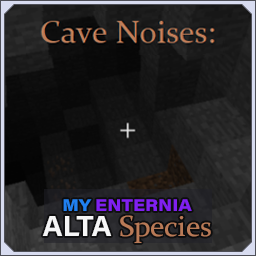
<style>
.page{position:relative;width:256px;height:256px}
.page>*{position:absolute;margin:0}
.t1{font:16.7px/25px "AcuminConcept_760.000wght_112.000wdth";color:#8020f0}
.t2{font:16.7px/25px "AcuminConcept_760.000wght_112.000wdth";color:#2080f0}
.t3{font:29.2px/25px "AcuminConcept-Bold";color:#f6f6f6}
.t4{font:29.2px/25px "Constantia";color:#b97a57}
</style>
<div class="page">
<p class="t1" style="left:42px;top:199px;width:169px;height:44px;text-align:center"><span class="t2">MY </span>ENTERNIA<br><span class="t3">ALTA</span><span class="t4"> Species</span></p>
</div>
